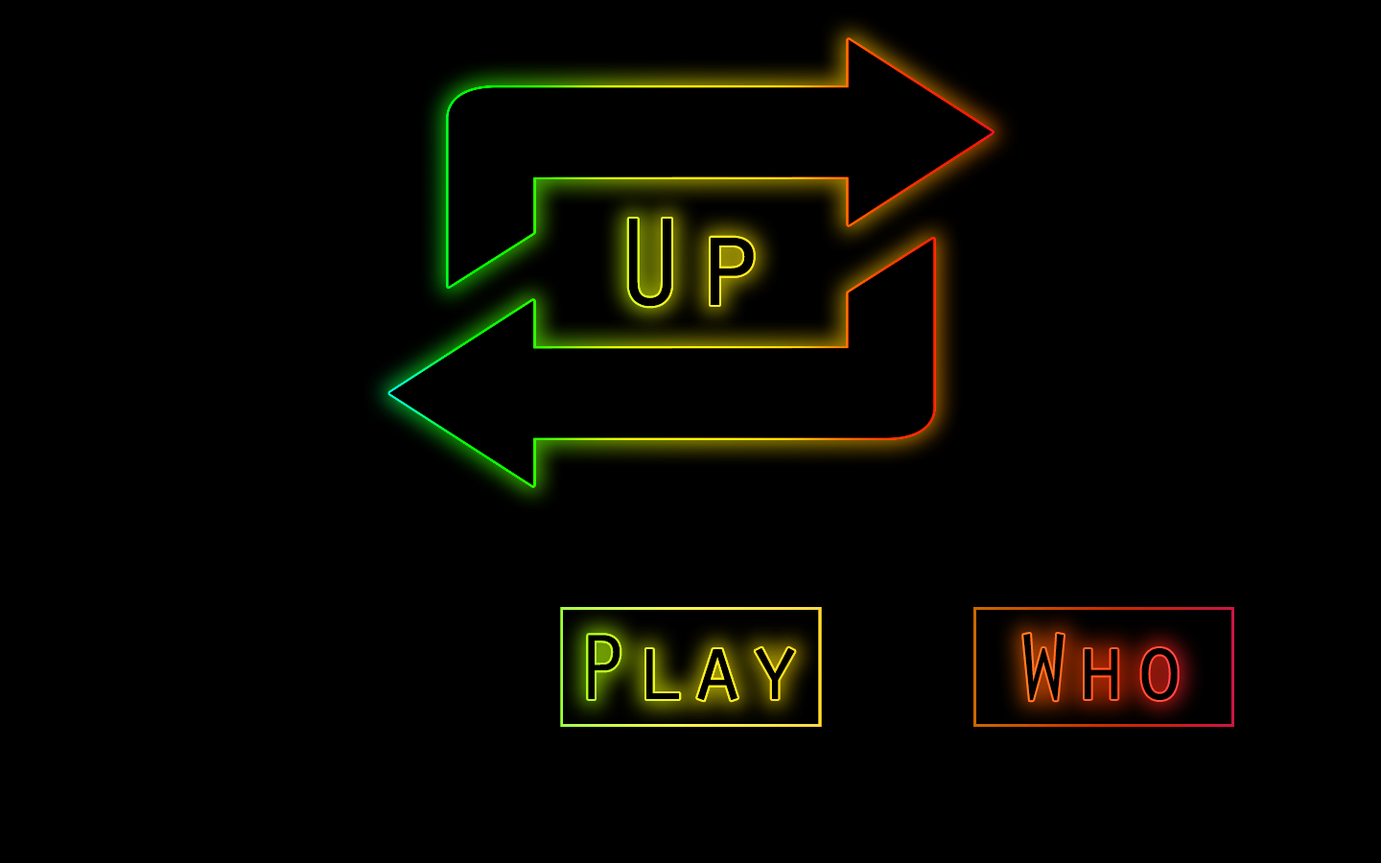
<style>
.page{position:relative;width:1381px;height:863px;background:#000000}
.page>*{position:absolute;margin:0}
.t1{font:129.6px "OratorStd";color:#000000}
.t2{font:95.9px "OratorStd";color:#000000}
</style>
<div class="page">
<p class="t1" style="left:628px;top:219px;width:126px;height:88px">Up</p>
<p class="t2" style="left:588px;top:635px;width:207px;height:66px">Play</p>
<p class="t2" style="left:1023px;top:634px;width:155px;height:67px">Who</p>
</div>
